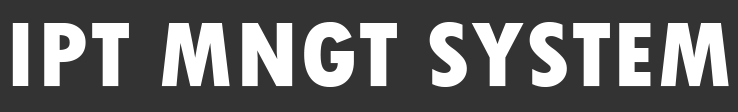
<style>
.page{position:relative;width:738px;height:112px;background:#333333}
.page>*{position:absolute;margin:0}
.t1{font:96.8px "TwCenMT-CondensedExtraBold";letter-spacing:0.005em;color:#ffffff;font-variant:small-caps;scale:1.07 1}
</style>
<div class="page">
<p class="t1" style="left:12px;top:22px;width:717px;height:65px">IPT MNGT SYSTEM</p>
</div>
